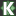
<style>
.page{position:relative;width:16px;height:16px;background:#333333}
.page>*{position:absolute;margin:0}
.t1{font:18px "SegoeUI-Bold";color:#ffffff}
</style>
<div class="page">
<p class="t1" style="left:3px;top:2px;width:11px;height:13px">K</p>
</div>
